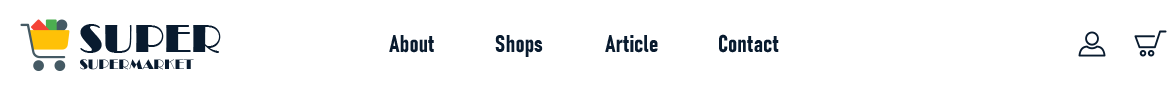
<style>
.page{position:relative;width:1170px;height:87px;background:#ffffff}
.page>*{position:absolute;margin:0}
.t1{font:24px "Bahnschrift-BoldCondensed";color:#091b2f}
</style>
<div class="page">
<p class="t1" style="left:389px;top:35px;width:45px;height:18px">About</p>
<p class="t1" style="left:495px;top:35px;width:48px;height:22px">Shops</p>
<p class="t1" style="left:605px;top:35px;width:53px;height:18px">Article</p>
<p class="t1" style="left:719px;top:34px;width:60px;height:19px">Contact</p>
</div>
